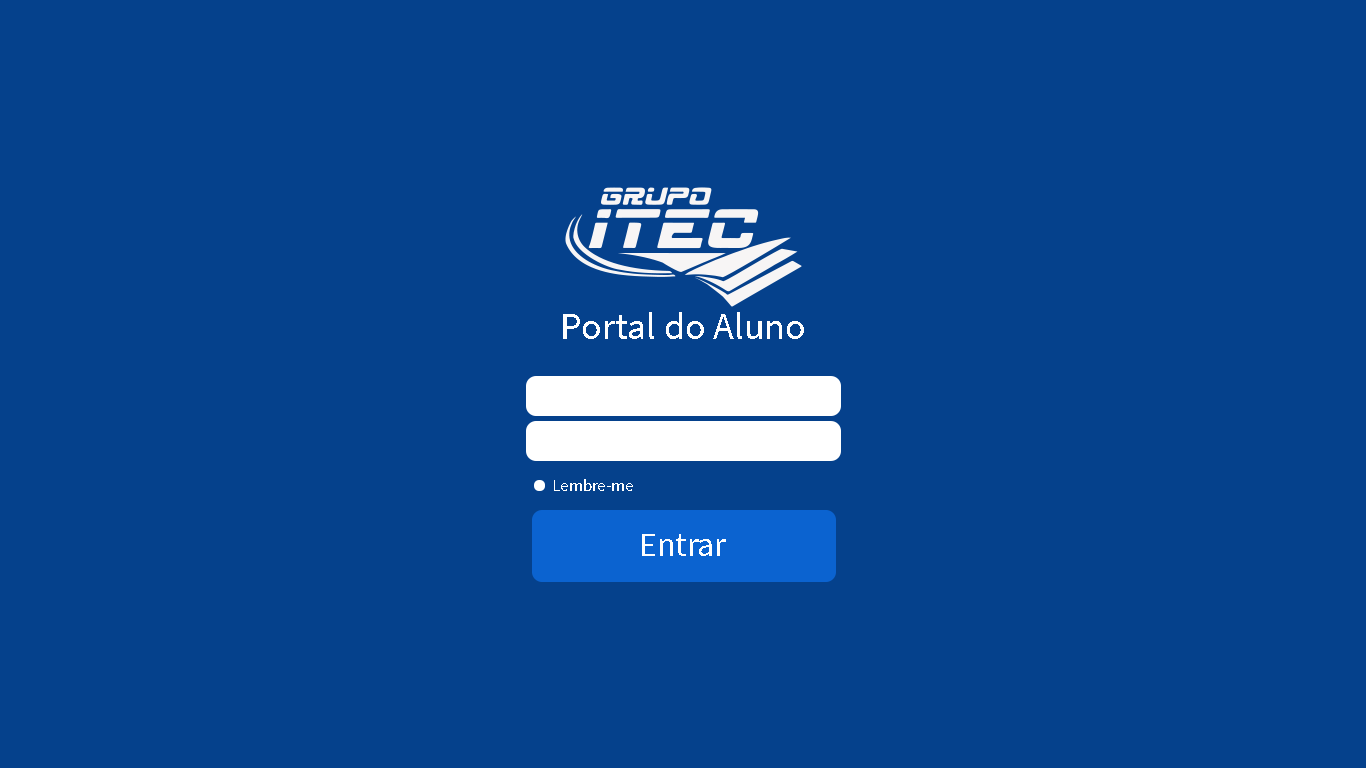
<style>
.page{position:relative;width:1366px;height:768px;background:#05418c}
.page>*{position:absolute;margin:0}
.t1{font:38.1px "SourceSansPro-Regular";color:#fefefe}
.t2{font:16.8px "SourceSansPro-Regular";color:#fefefe}
.t3{font:33.7px "SourceSansPro-Regular";color:#fefefe}
</style>
<div class="page">
<p class="t1" style="left:563px;top:312px;width:241px;height:27px">Portal do Aluno</p>
<p class="t2" style="left:554px;top:479px;width:79px;height:12px">Lembre-me</p>
<p class="t3" style="left:642px;top:534px;width:84px;height:22px">Entrar</p>
</div>
